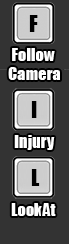
<style>
.page{position:relative;width:69px;height:244px;background:#333333}
.page>*{position:absolute;margin:0}
.t1{font:22px "Impact";color:#000000}
.t2{font:16.4px "Impact";color:#ffffff}
.t3{font:22.1px "Impact";color:#000000}
.t4{font:16.6px "Impact";color:#ffffff}
</style>
<div class="page">
<p class="t1" style="left:29px;top:15px;width:9px;height:17px">F</p>
<p class="t2" style="left:8px;top:48px;width:52px;height:32px;text-align:center">Follow <br>Camera</p>
<p class="t3" style="left:31px;top:101px;width:6px;height:17px">I</p>
<p class="t4" style="left:14px;top:135px;width:41px;height:15px">Injury</p>
<p class="t1" style="left:31px;top:169px;width:9px;height:17px">L</p>
<p class="t2" style="left:11px;top:203px;width:45px;height:13px">LookAt</p>
</div>
